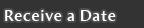
<style>
.page{position:relative;width:144px;height:28px;background:#333333}
.page>*{position:absolute;margin:0}
.t1{font:16px "AmiraParadiso";letter-spacing:0.05em;color:#ffffff}
</style>
<div class="page">
<p class="t1" style="left:5px;top:10px;width:111px;height:11px">Receive a Date</p>
</div>
